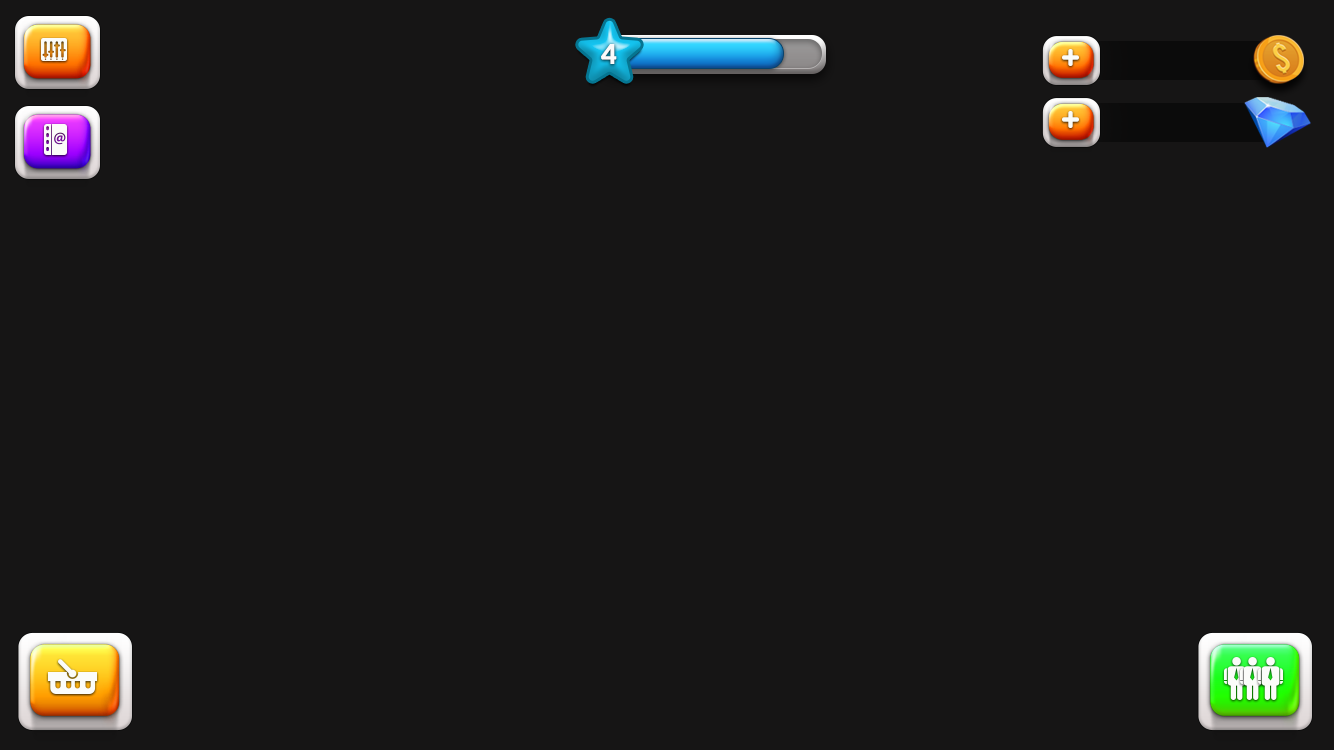
<style>
.page{position:relative;width:1334px;height:750px;background:#161515}
.page>*{position:absolute;margin:0}
.t1{font:27.2px "Lato-Black";letter-spacing:-0.01em;color:#fbfafa}
</style>
<div class="page">
<p class="t1" style="left:601px;top:44px;width:16px;height:20px">4</p>
</div>
